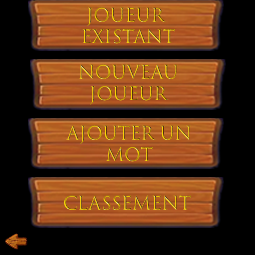
<style>
.page{position:relative;width:255px;height:255px;background:#000000}
.page>*{position:absolute;margin:0}
.t1{font:17.9px "TrajanColor-Concept"}
</style>
<div class="page">
<p class="t1" style="left:82px;top:7px;width:93px;height:37px;text-align:center">JouEUR <br>Existant</p>
<p class="t1" style="left:79px;top:64px;width:99px;height:41px;text-align:center">Nouveau<br>JouEUR</p>
<p class="t1" style="left:66px;top:125px;width:125px;height:37px;text-align:center">AJOUTER UN<br>MOT</p>
<p class="t1" style="left:64px;top:195px;width:127px;height:15px">Classement</p>
</div>
